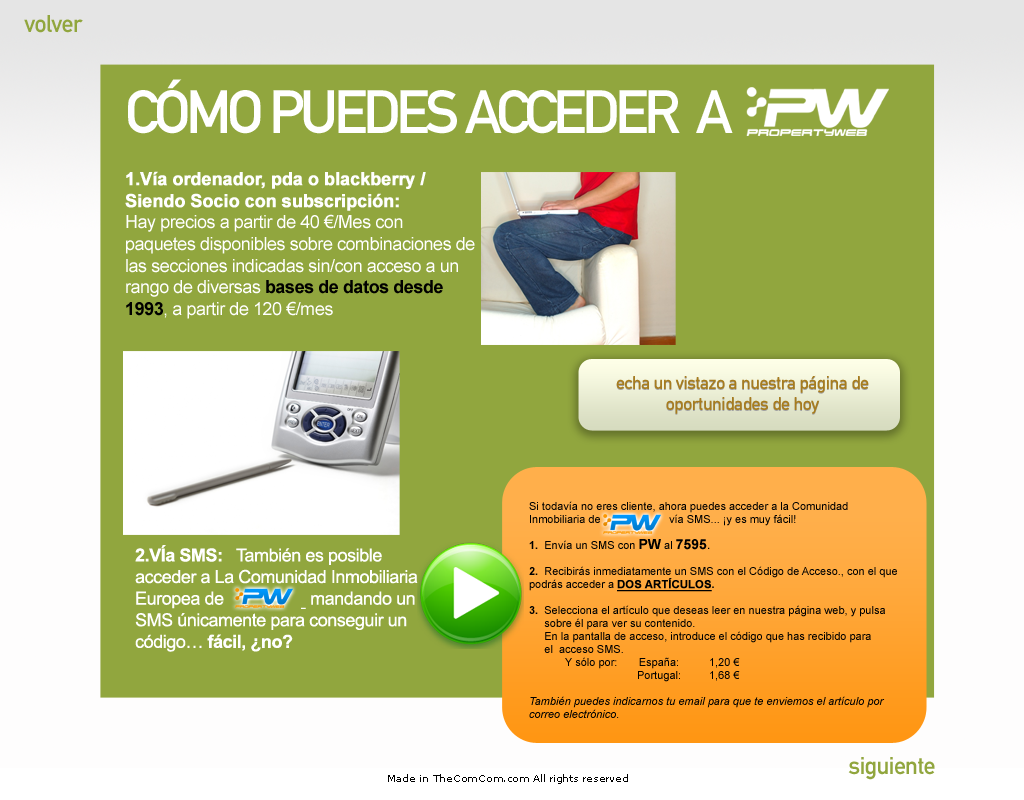
<style>
.page{position:relative;width:1024px;height:800px;background:#91a63e}
.page>*{position:absolute;margin:0}
.t1{font:24px "DINMittelschriftStd";letter-spacing:-0.025em;color:#91a63e}
.t2{font:60px "DINMittelschriftStd";letter-spacing:-0.075em;color:#ffffff;text-transform:uppercase}
.t3{font:18px "ArialMT";letter-spacing:-0.025em;color:#ffffff}
.t4{font:18px "Arial-BoldMT";letter-spacing:-0.025em;color:#ffffff;font-weight:bold}
.t5{font:18px "Arial-BoldMT";letter-spacing:-0.025em;color:#000000}
.t6{font:18px "DINMittelschriftStd";letter-spacing:-0.025em}
.t7{font:18px "DINMittelschriftStd";letter-spacing:-0.025em;color:#a77c1e}
.t8{font:11px/13px "ArialMT";color:#000000}
.t9{font:11px/13px "Arial-BoldMT";color:#000000}
.t10{font:14px/13px "Arial-BoldMT";color:#000000}
.t11{font:14px/13px "ArialMT";color:#000000}
.t12{font:11px/13px "Arial-BoldMT";color:#000000;font-weight:bold;text-decoration:underline}
.t13{font:11px/13px "Arial-ItalicMT";color:#000000}
.t14{font:18px "Arial-BoldMT";letter-spacing:-0.025em;color:#ffffff}
.t15{font:10px "MSReferenceSansSerif";letter-spacing:-0.025em;color:#010101}
</style>
<div class="page">
<p class="t1" style="left:24px;top:15px;width:59px;height:18px">volver</p>
<p class="t2" style="left:128px;top:79px;width:605px;height:55px">CóMO PUEDES ACCEDER  a</p>
<p class="t3" style="left:125px;top:171px;width:350px;height:148px"><span class="t4">1.Vía ordenador, pda o blackberry / Siendo Socio con subscripción:              </span>  Hay precios a partir de 40 €/Mes con paquetes disponibles sobre combinaciones de las secciones indicadas sin/con acceso a un rango de diversas <span class="t5">bases de datos desde 1993</span>, a partir de 120 €/mes</p>
<p class="t6" style="left:616px;top:376px;width:253px;height:39px;text-align:center">echa un vistazo a nuestra página de oportunidades de hoy</p>
<p class="t7" style="left:616px;top:375px;width:253px;height:39px;text-align:center">echa un vistazo a nuestra página de oportunidades de hoy</p>
<p class="t8" style="left:529px;top:501px;width:368px;height:217px">Si todavía no eres cliente, ahora puedes acceder a la Comunidad Inmobiliaria de                   vía SMS... ¡y es muy fácil!<br> <br><span class="t9">1.</span>  Envía un SMS con <span class="t10">PW</span> al <span class="t10">7595</span><span class="t11">.<br> <br></span><span class="t9">2. </span> Recibirás inmediatamente un SMS con el Código de Acceso., con el que podrás acceder a <span class="t12">DOS ARTÍCULOS</span><span class="t9">.<br><br>3.</span>  Selecciona el artículo que deseas leer en nuestra página web, y pulsa            sobre él para ver su contenido.<br>     En la pantalla de acceso, introduce el código que has recibido para                           el  acceso SMS. <br>   Y sólo por:       España:    1,20 €  <br>       Portugal:    1,68 €  <br><span class="t13"><br>También puedes indicarnos tu email para que te enviemos el artículo por correo electrónico.</span></p>
<p class="t3" style="left:135px;top:545px;width:283px;height:107px"><span class="t14">2.VÍa SMS:</span>   También es posible acceder a La Comunidad Inmobiliaria Europea de                   mandando un SMS únicamente para conseguir un código… <span class="t14">fácil, ¿no?</span></p>
<p class="t1" style="left:848px;top:757px;width:87px;height:23px">siguiente</p>
<p class="t15" style="left:388px;top:774px;width:240px;height:10px">Made in TheComCom.com All rights reserved</p>
</div>
